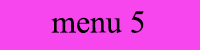
<style>
.page{position:relative;width:200px;height:50px;background:#f846ee}
.page>*{position:absolute;margin:0}
.t1{font:48px "AngsanaNew";color:#000000}
</style>
<div class="page">
<p class="t1" style="left:51px;top:11px;width:93px;height:22px">menu 5</p>
</div>
